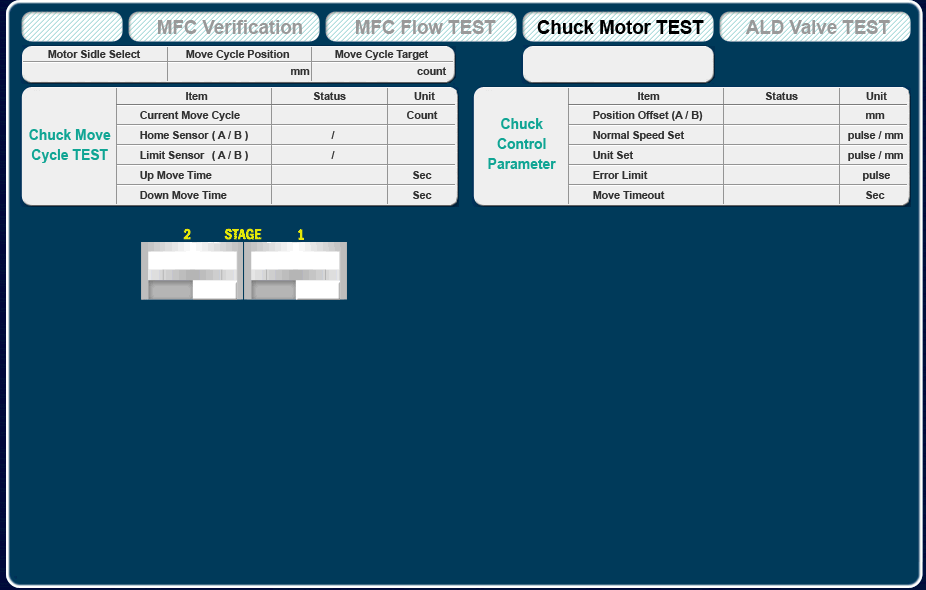
<style>
.page{position:relative;width:926px;height:590px;background:#003a5a}
.page>*{position:absolute;margin:0}
.t1{font:18.7px "Arial-BoldMT";color:#999999}
.t2{font:18.7px "Arial-BoldMT";color:#000000}
.t3{font:10.7px "Arial-BoldMT";color:#313131}
.t4{font:10.7px/20px "Arial-BoldMT";color:#313131}
.t5{font:14.7px/20px "Arial-BoldMT";color:#10a594;scale:0.95 1}
</style>
<div class="page">
<p class="t1" style="left:158px;top:20px;width:144px;height:14px">MFC Verification</p>
<p class="t1" style="left:356px;top:20px;width:140px;height:14px">MFC Flow TEST</p>
<p class="t2" style="left:537px;top:20px;width:167px;height:14px">Chuck Motor TEST</p>
<p class="t1" style="left:745px;top:20px;width:145px;height:14px">ALD Valve TEST</p>
<p class="t3" style="left:48px;top:50px;width:93px;height:8px">Motor Sidle Select</p>
<p class="t3" style="left:186px;top:50px;width:104px;height:10px">Move Cycle Position</p>
<p class="t3" style="left:335px;top:50px;width:94px;height:10px">Move Cycle Target</p>
<p class="t4" style="left:140px;top:111px;width:298px;height:88px">Current Move Cycle          Count<br>Home Sensor ( A / B )      /<br>Limit Sensor  ( A / B )      /<br>Up Move Time            Sec<br>Down Move Time            Sec</p>
<p class="t4" style="left:593px;top:111px;width:310px;height:88px">Position Offset (A / B)           mm<br>Normal Speed Set      pulse / mm<br>Unit Set        pulse / mm<br>Error Limit            pulse<br>Move Timeout             Sec</p>
<p class="t5" style="left:488px;top:118px;width:68px;height:51px;text-align:center">Chuck<br>Control<br>Parameter</p>
<p class="t5" style="left:29px;top:129px;width:82px;height:34px;text-align:center">Chuck Move<br>Cycle TEST</p>
</div>
